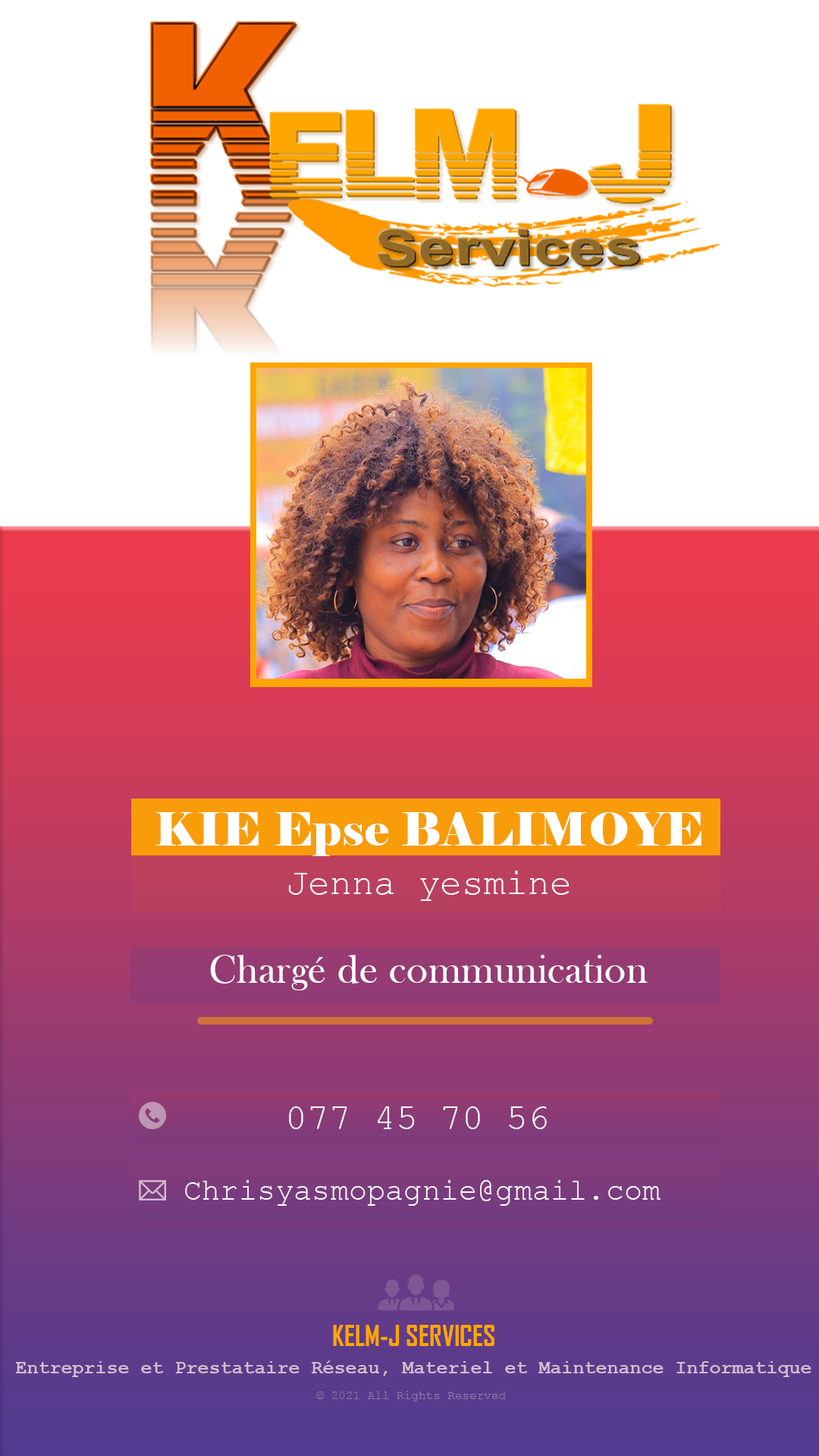
<style>
.page{position:relative;width:819px;height:1456px;background:#ffffff}
.page>*{position:absolute;margin:0}
.t1{font:45.5px "Elephant-Regular";letter-spacing:0.01em;color:#ffffff}
.t2{font:36.4px "CourierNewPSMT";letter-spacing:0.005em;color:#ffffff}
.t3{font:40.9px "BaskOldFace";letter-spacing:0.01em;color:#ffffff}
.t4{font:30.3px "CourierNewPSMT";letter-spacing:0.005em;color:#ffffff}
.t5{font:27.3px "AgencyFB-Bold";color:#fea600}
.t6{font:19px "CourierNewPS-BoldMT";color:#ebbfdf}
.t7{font:12.1px "CourierNewPSMT";color:#957aa7}
</style>
<div class="page">
<p class="t1" style="left:155px;top:812px;width:546px;height:44px">KIE Epse BALIMOYE</p>
<p class="t2" style="left:288px;top:871px;width:282px;height:30px">Jenna yesmine</p>
<p class="t3" style="left:210px;top:955px;width:438px;height:35px">Chargé de communication</p>
<p class="t2" style="left:289px;top:1106px;width:258px;height:23px">077 45 70 56</p>
<p class="t4" style="left:185px;top:1180px;width:475px;height:26px">Chrisyasmopagnie@gmail.com</p>
<p class="t5" style="left:333px;top:1325px;width:161px;height:21px">KELM-J SERVICES</p>
<p class="t6" style="left:15px;top:1360px;width:796px;height:17px">Entreprise et Prestataire Réseau, Materiel et Maintenance Informatique</p>
<p class="t7" style="left:316px;top:1391px;width:190px;height:10px">© 2021 All Rights Reserved</p>
</div>
